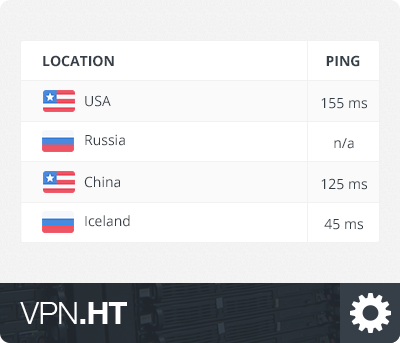
<style>
.page{position:relative;width:400px;height:343px;background:#ffffff}
.page>*{position:absolute;margin:0}
.t1{font:14px "OpenSans-Bold";color:#353f48;text-transform:uppercase}
.t2{font:14px "OpenSans";color:#353f48}
</style>
<div class="page">
<p class="t1" style="left:43px;top:55px;width:71px;height:12px">Location</p>
<p class="t1" style="left:326px;top:55px;width:34px;height:12px">Ping</p>
<p class="t2" style="left:85px;top:95px;width:26px;height:12px">USA</p>
<p class="t2" style="left:321px;top:98px;width:46px;height:11px">155 ms</p>
<p class="t2" style="left:85px;top:134px;width:40px;height:12px">Russia</p>
<p class="t2" style="left:334px;top:138px;width:20px;height:11px">n/a</p>
<p class="t2" style="left:84px;top:176px;width:36px;height:12px">China</p>
<p class="t2" style="left:321px;top:178px;width:46px;height:12px">125 ms</p>
<p class="t2" style="left:85px;top:215px;width:45px;height:12px">Iceland</p>
<p class="t2" style="left:324px;top:219px;width:39px;height:11px">45 ms</p>
</div>
